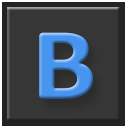
<style>
.page{position:relative;width:128px;height:128px;background:#363636}
.page>*{position:absolute;margin:0}
.t1{font:104px "Calibri-Bold";color:#4895ef;scale:1.12 1}
</style>
<div class="page">
<p class="t1" style="left:39px;top:32px;width:54px;height:67px">B</p>
</div>
